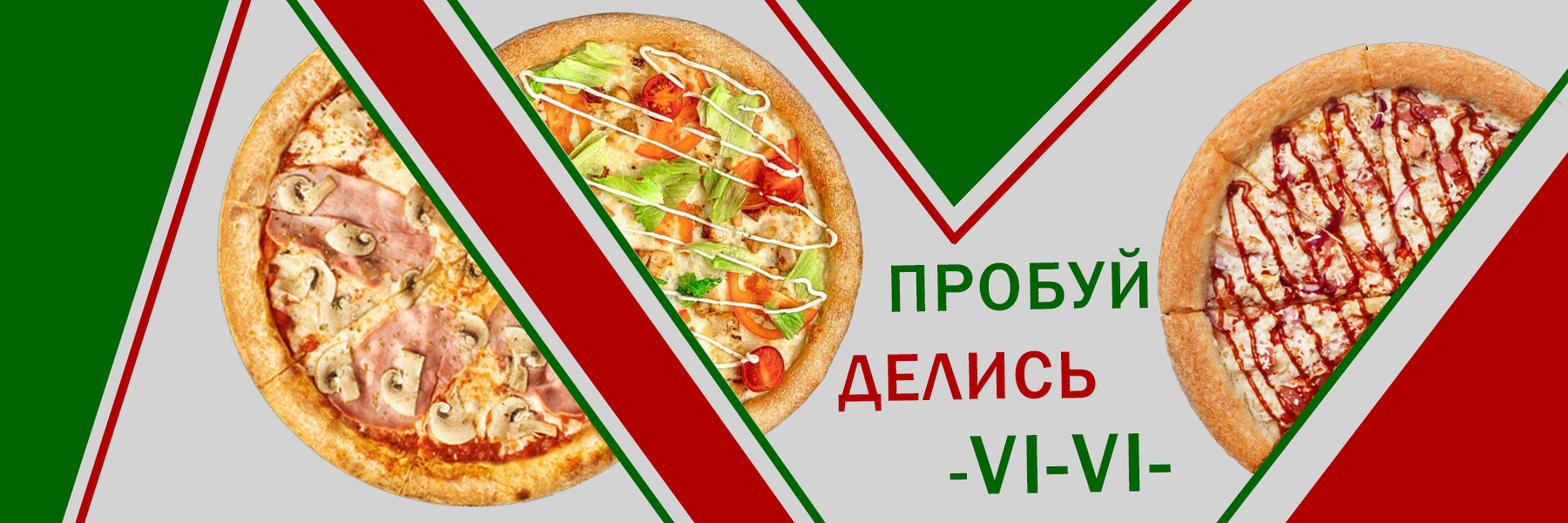
<style>
.page{position:relative;width:1568px;height:523px;background:#d3d3d3}
.page>*{position:absolute;margin:0}
.t1{font:69.7px "FranklinGothic-Medium";letter-spacing:0.04em;color:#006400;text-transform:uppercase}
.t2{font:69.7px "FranklinGothic-Medium";letter-spacing:0.04em;color:#b00000;text-transform:uppercase}
.t3{font:87.1px "FranklinGothic-Medium";letter-spacing:0.04em;color:#006400;text-transform:uppercase}
</style>
<div class="page">
<p class="t1" style="left:891px;top:247px;width:257px;height:65px;rotate:-1deg">пРОБУЙ</p>
<p class="t2" style="left:838px;top:350px;width:258px;height:62px;rotate:-1deg">делись</p>
<p class="t3" style="left:950px;top:433px;width:221px;height:61px;rotate:-1deg"><span class="t1"> -</span>VI-VI-</p>
</div>
